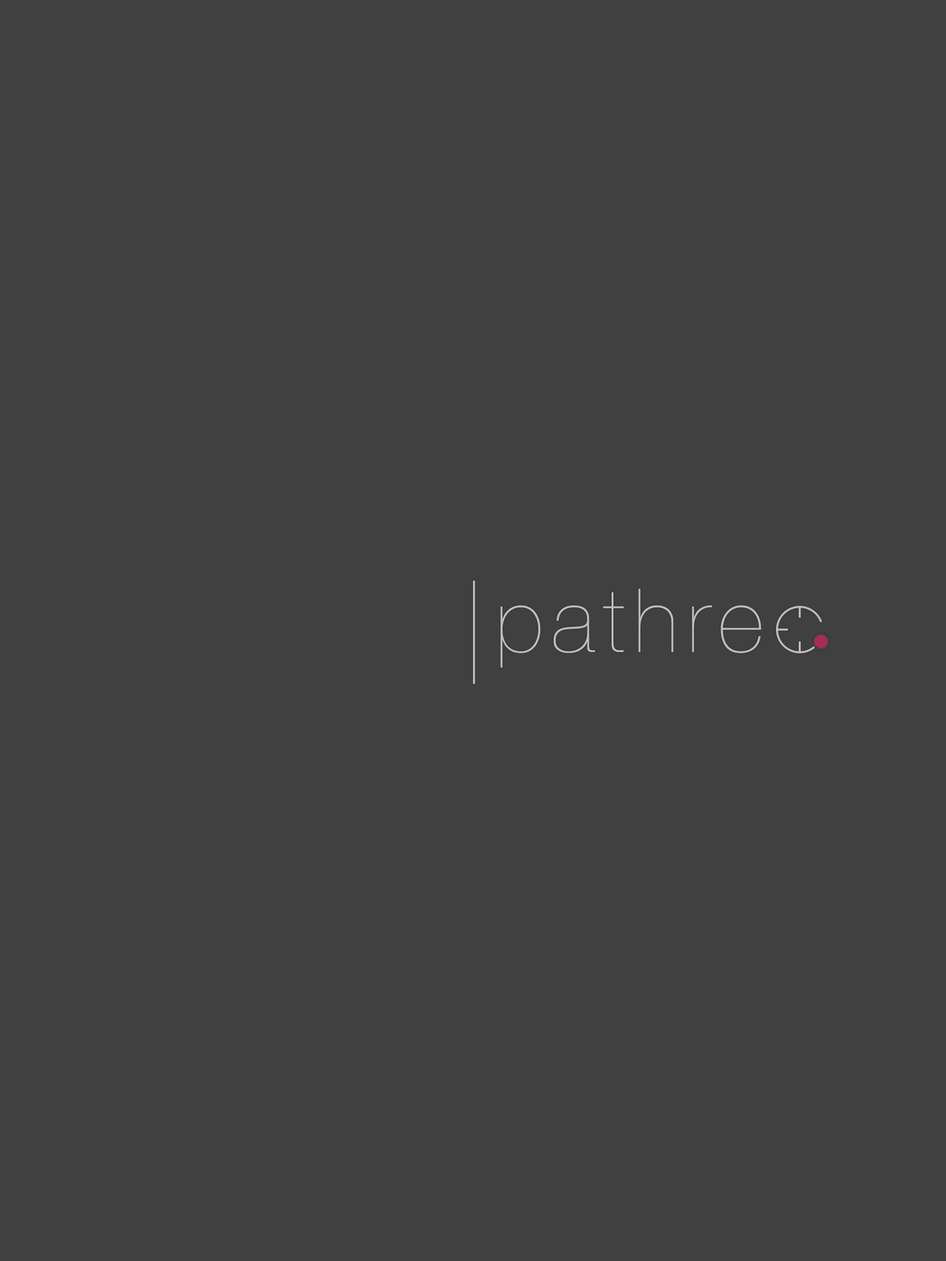
<style>
.page{position:relative;width:946px;height:1261px;background:#404040}
.page>*{position:absolute;margin:0}
.t1{font:88.7px "HelveticaNeue-UltraLight";letter-spacing:0.1em;color:#bebebe}
.t2{font:103.4px "HelveticaNeue-UltraLight";letter-spacing:0.1em;color:#bebebe}
</style>
<div class="page">
<p class="t1" style="left:473px;top:581px;width:288px;height:103px"><span class="t2">|</span>pathre</p>
</div>
